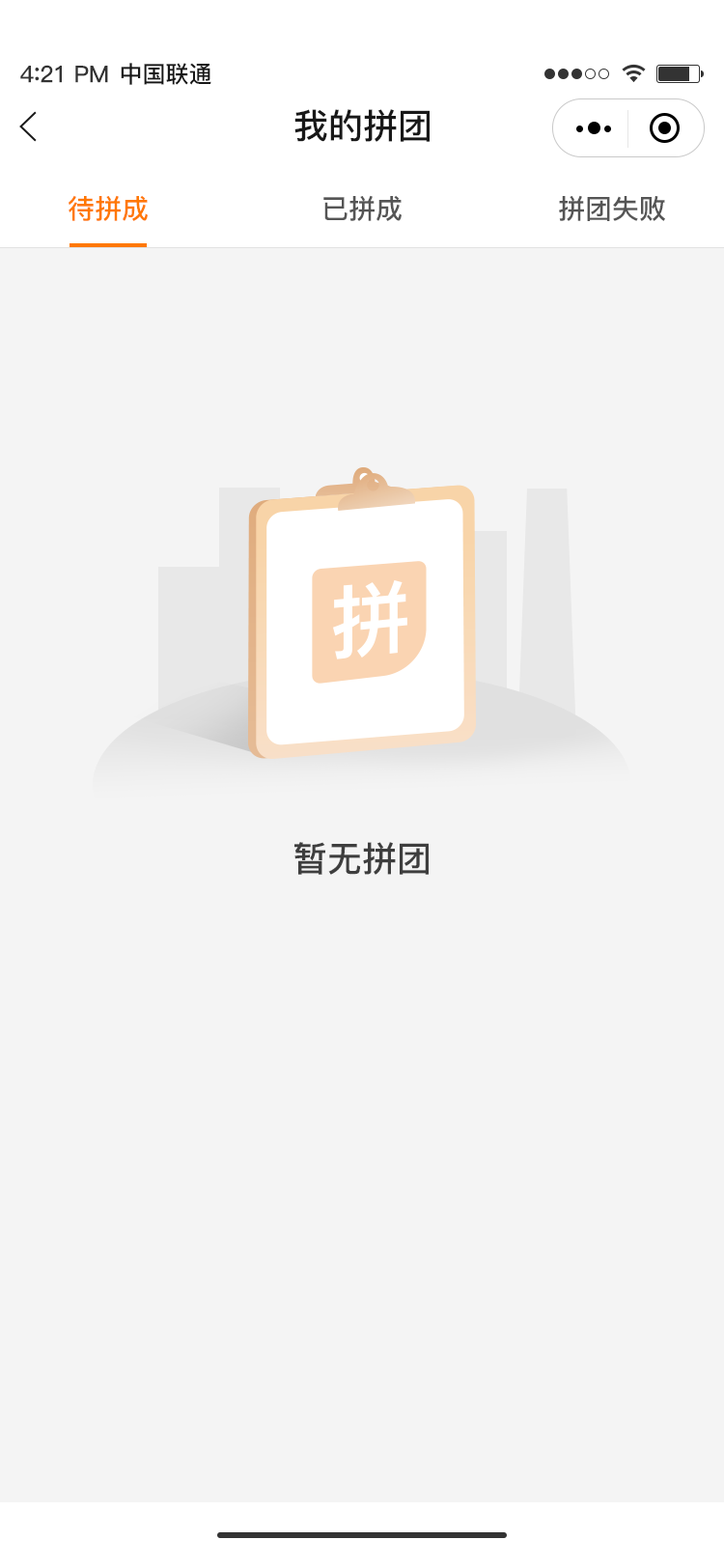
<style>
.page{position:relative;width:724px;height:1568px;background:#f4f4f4}
.page>*{position:absolute;margin:0}
.t1{font:23.2px "PingFang-SC-Bold";letter-spacing:-0.02em;color:#333333}
.t2{font:25.1px "PingFang-SC-Bold";letter-spacing:-0.02em;color:#333333}
.t3{font:23.2px "PingFang-SC-Bold";color:#181818}
.t4{font:34.8px "PingFang-SC-Bold";color:#181818}
.t5{font:27px "PingFang-SC-Bold";color:#ff7800}
.t6{font:27px "PingFang-SC-Bold";color:#555555}
.t7{font:34.8px "PingFang-SC-Bold";color:#3e3e3e}
</style>
<div class="page">
<p class="t1" style="left:20px;top:65px;width:88px;height:18px">4<span class="t2">:</span>21 PM</p>
<p class="t3" style="left:121px;top:63px;width:90px;height:22px">中国联通</p>
<p class="t4" style="left:294px;top:109px;width:136px;height:33px">我的拼团</p>
<p class="t5" style="left:69px;top:195px;width:79px;height:26px">待拼成</p>
<p class="t6" style="left:323px;top:195px;width:79px;height:26px">已拼成</p>
<p class="t6" style="left:559px;top:195px;width:106px;height:26px">拼团失败</p>
<p class="t7" style="left:294px;top:842px;width:135px;height:33px">暂无拼团</p>
</div>
